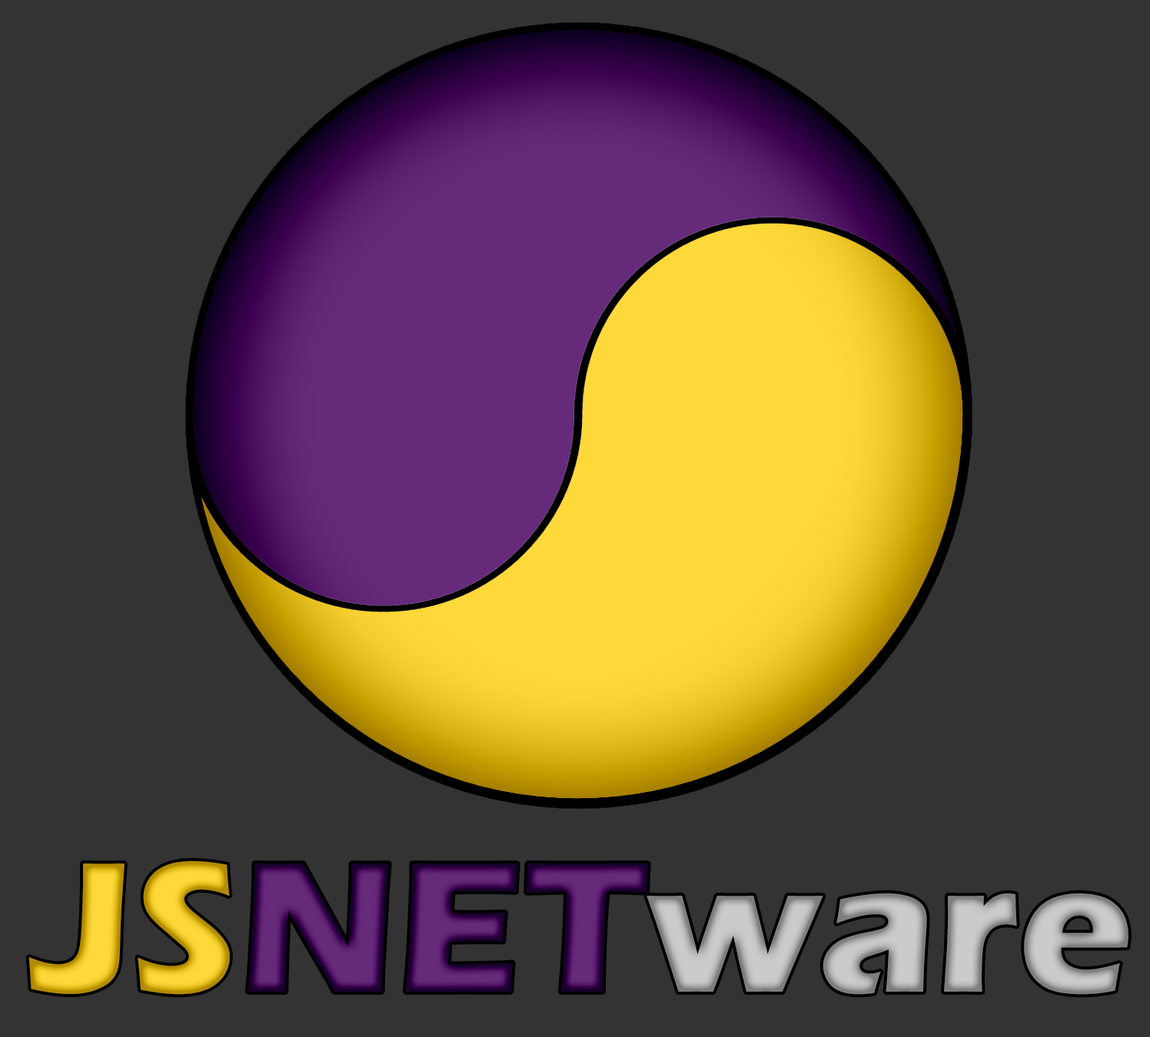
<style>
.page{position:relative;width:1150px;height:1037px;background:#333333}
.page>*{position:absolute;margin:0}
.t1{font:192.1px "ErasITC-Bold"}
</style>
<div class="page">
<p class="t1" style="left:28px;top:861px;width:1100px;height:134px">JSNETware</p>
</div>
